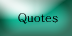
<style>
.page{position:relative;width:72px;height:36px}
.page>*{position:absolute;margin:0}
.t1{font:12px "Batang";color:#000000}
</style>
<div class="page">
<p class="t1" style="left:18px;top:13px;width:40px;height:11px">Quotes</p>
</div>
